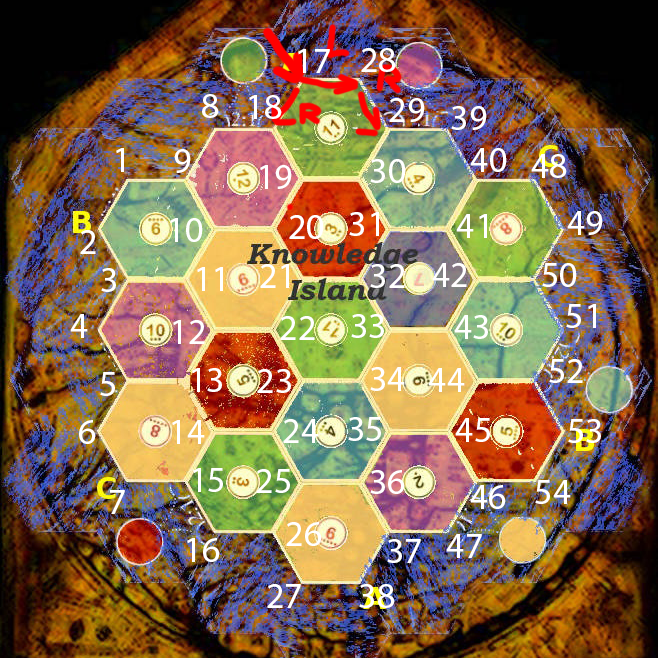
<style>
.page{position:relative;width:658px;height:658px}
.page>*{position:absolute;margin:0}
.t1{font:36px "MyriadPro-Regular";color:#ffffff}
</style>
<div class="page">
<p class="t1" style="left:298px;top:49px;width:32px;height:24px">17</p>
<p class="t1" style="left:361px;top:48px;width:35px;height:24px">28</p>
<p class="t1" style="left:202px;top:94px;width:17px;height:24px">8</p>
<p class="t1" style="left:249px;top:95px;width:33px;height:24px">18</p>
<p class="t1" style="left:389px;top:98px;width:36px;height:24px">29</p>
<p class="t1" style="left:451px;top:106px;width:36px;height:24px">39</p>
<p class="t1" style="left:116px;top:148px;width:8px;height:24px">1</p>
<p class="t1" style="left:174px;top:149px;width:17px;height:24px">9</p>
<p class="t1" style="left:470px;top:148px;width:37px;height:24px">40</p>
<p class="t1" style="left:370px;top:159px;width:36px;height:24px">30</p>
<p class="t1" style="left:531px;top:154px;width:36px;height:24px">48</p>
<p class="t1" style="left:260px;top:165px;width:32px;height:24px">19</p>
<p class="t1" style="left:170px;top:218px;width:33px;height:24px">10</p>
<p class="t1" style="left:289px;top:215px;width:35px;height:24px">20</p>
<p class="t1" style="left:349px;top:212px;width:30px;height:24px">31</p>
<p class="t1" style="left:456px;top:214px;width:31px;height:24px">41</p>
<p class="t1" style="left:567px;top:211px;width:36px;height:24px">49</p>
<p class="t1" style="left:80px;top:230px;width:16px;height:24px">2</p>
<p class="t1" style="left:101px;top:268px;width:15px;height:24px">3</p>
<p class="t1" style="left:197px;top:267px;width:26px;height:24px">11</p>
<p class="t1" style="left:260px;top:264px;width:29px;height:24px">21</p>
<p class="t1" style="left:370px;top:264px;width:35px;height:24px">32</p>
<p class="t1" style="left:432px;top:263px;width:35px;height:24px">42</p>
<p class="t1" style="left:542px;top:263px;width:35px;height:24px">50</p>
<p class="t1" style="left:566px;top:304px;width:30px;height:24px">51</p>
<p class="t1" style="left:70px;top:314px;width:18px;height:24px">4</p>
<p class="t1" style="left:280px;top:316px;width:35px;height:24px">22</p>
<p class="t1" style="left:351px;top:314px;width:33px;height:24px">33</p>
<p class="t1" style="left:454px;top:315px;width:34px;height:24px">43</p>
<p class="t1" style="left:173px;top:320px;width:32px;height:24px">12</p>
<p class="t1" style="left:549px;top:359px;width:34px;height:24px">52</p>
<p class="t1" style="left:100px;top:372px;width:15px;height:24px">5</p>
<p class="t1" style="left:192px;top:368px;width:30px;height:24px">13</p>
<p class="t1" style="left:257px;top:369px;width:34px;height:24px">23</p>
<p class="t1" style="left:370px;top:367px;width:35px;height:24px">34</p>
<p class="t1" style="left:428px;top:368px;width:37px;height:24px">44</p>
<p class="t1" style="left:79px;top:420px;width:17px;height:24px">6</p>
<p class="t1" style="left:172px;top:420px;width:33px;height:24px">14</p>
<p class="t1" style="left:283px;top:419px;width:36px;height:24px">24</p>
<p class="t1" style="left:348px;top:417px;width:33px;height:24px">35</p>
<p class="t1" style="left:455px;top:418px;width:35px;height:24px">45</p>
<p class="t1" style="left:568px;top:419px;width:33px;height:24px">53</p>
<p class="t1" style="left:193px;top:468px;width:30px;height:24px">15</p>
<p class="t1" style="left:256px;top:469px;width:34px;height:24px">25</p>
<p class="t1" style="left:370px;top:470px;width:35px;height:24px">36</p>
<p class="t1" style="left:470px;top:485px;width:36px;height:24px">46</p>
<p class="t1" style="left:535px;top:480px;width:36px;height:24px">54</p>
<p class="t1" style="left:110px;top:490px;width:15px;height:24px">7</p>
<p class="t1" style="left:286px;top:522px;width:36px;height:24px">26</p>
<p class="t1" style="left:446px;top:534px;width:36px;height:24px">47</p>
<p class="t1" style="left:187px;top:538px;width:33px;height:24px">16</p>
<p class="t1" style="left:387px;top:539px;width:34px;height:24px">37</p>
<p class="t1" style="left:267px;top:584px;width:34px;height:24px">27</p>
<p class="t1" style="left:359px;top:584px;width:36px;height:24px">38</p>
</div>
